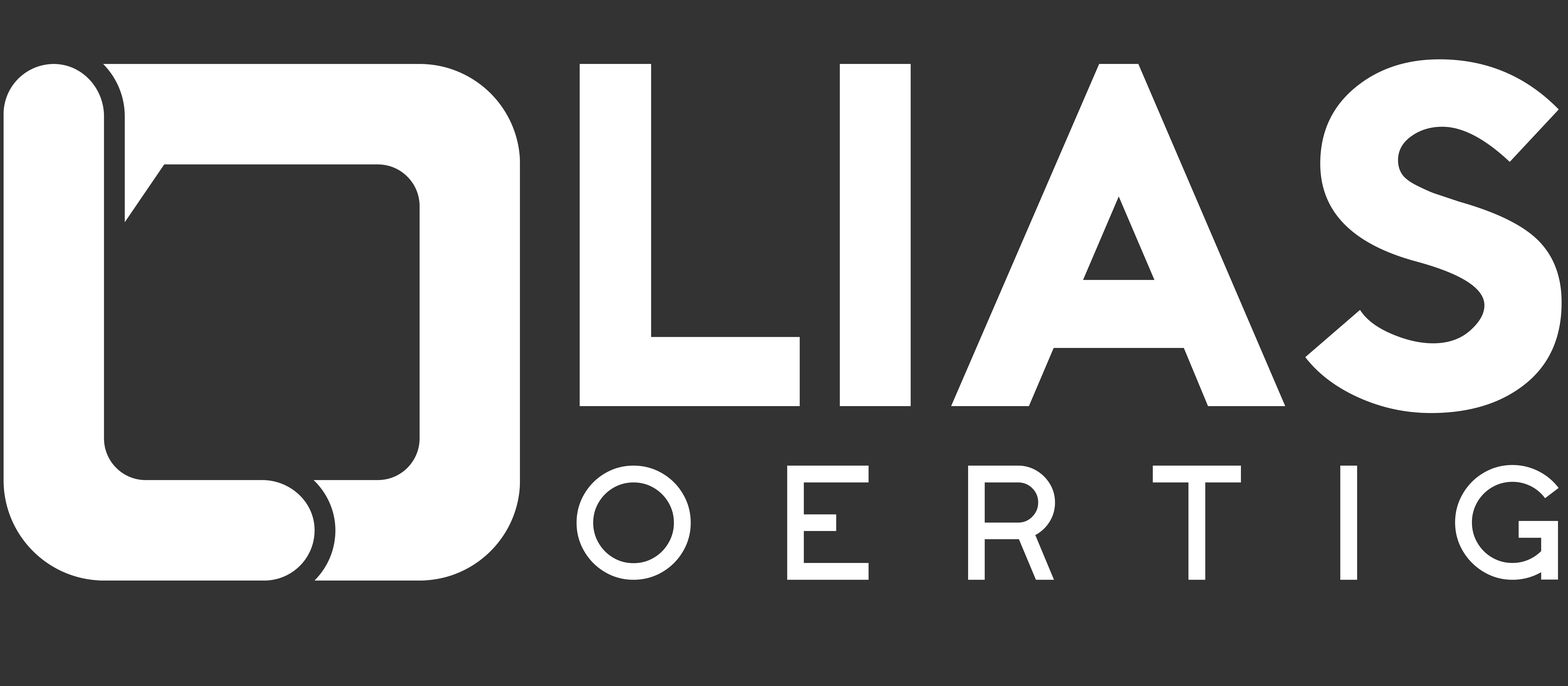
<style>
.page{position:relative;width:1568px;height:686px;background:#333333}
.page>*{position:absolute;margin:0}
.t1{font:575.9px "-OCPajaro-Black";color:#ffffff}
.t2{font:204.9px "Westmount-ExtraLight";letter-spacing:0.231em;color:#ffffff}
</style>
<div class="page">
<p class="t1" style="left:579px;top:59px;width:983px;height:354px">LIAS</p>
<p class="t2" style="left:577px;top:465px;width:982px;height:115px">OERTIG</p>
</div>
